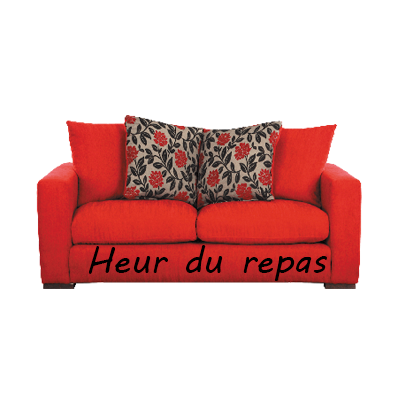
<style>
.page{position:relative;width:400px;height:400px;background:#ffffff}
.page>*{position:absolute;margin:0}
.t1{font:36px "MVBoli";color:#000000}
</style>
<div class="page">
<p class="t1" style="left:88px;top:245px;width:239px;height:36px">Heur du repas</p>
</div>
